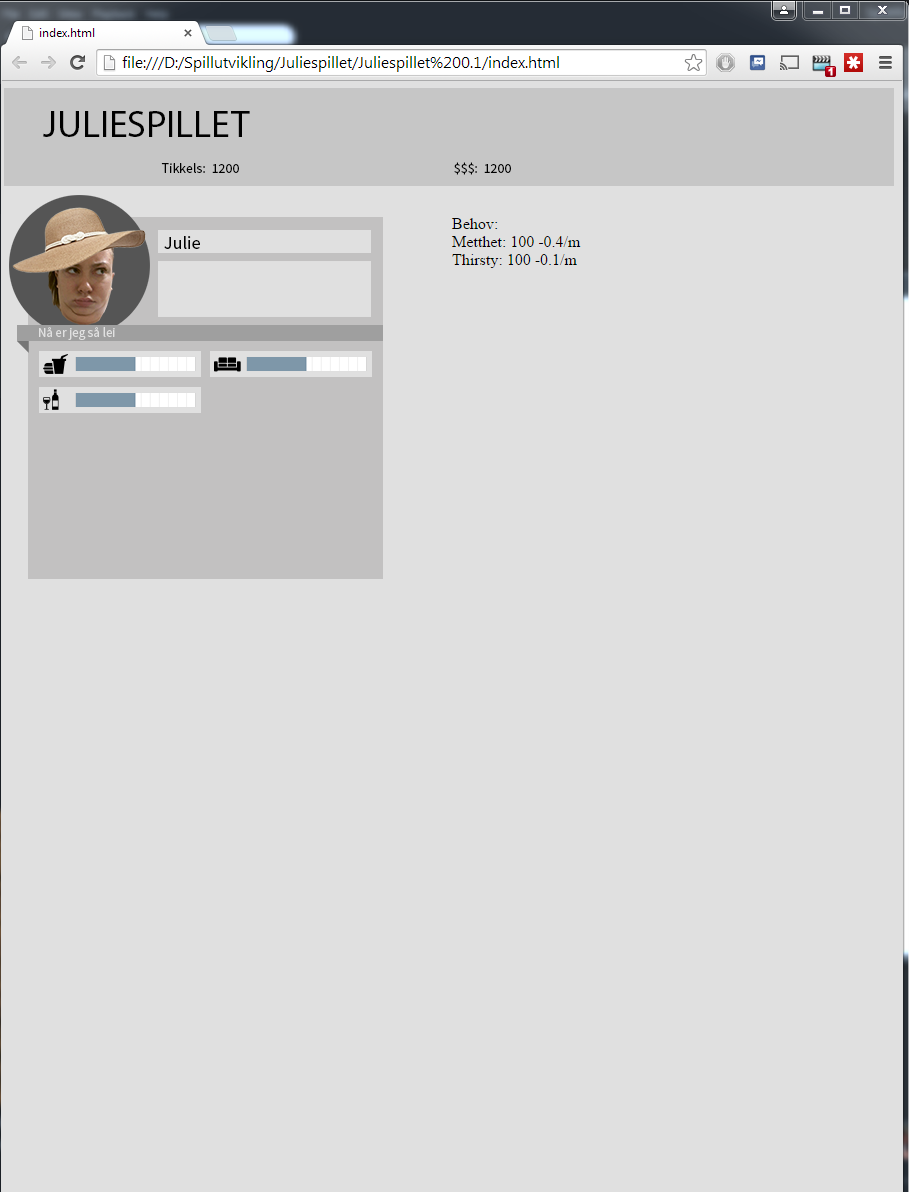
<style>
.page{position:relative;width:909px;height:1192px;background:#e0e0e0}
.page>*{position:absolute;margin:0}
.t1{font:38px "MyriadPro-Regular";color:#000000}
.t2{font:14px "SourceSansPro-Regular";color:#000000}
.t3{font:18px "SourceSansPro-Regular";color:#000000}
.t4{font:13px "SourceSansPro-Regular";color:#e1e1e1}
</style>
<div class="page">
<p class="t1" style="left:43px;top:111px;width:207px;height:26px">JULIESPILLET</p>
<p class="t2" style="left:161px;top:163px;width:78px;height:10px">Tikkels:  1200</p>
<p class="t2" style="left:454px;top:162px;width:57px;height:13px">$$$:  1200</p>
<p class="t3" style="left:164px;top:236px;width:36px;height:13px">Julie</p>
<p class="t4" style="left:39px;top:327px;width:76px;height:13px">Nå er jeg så lei</p>
</div>
